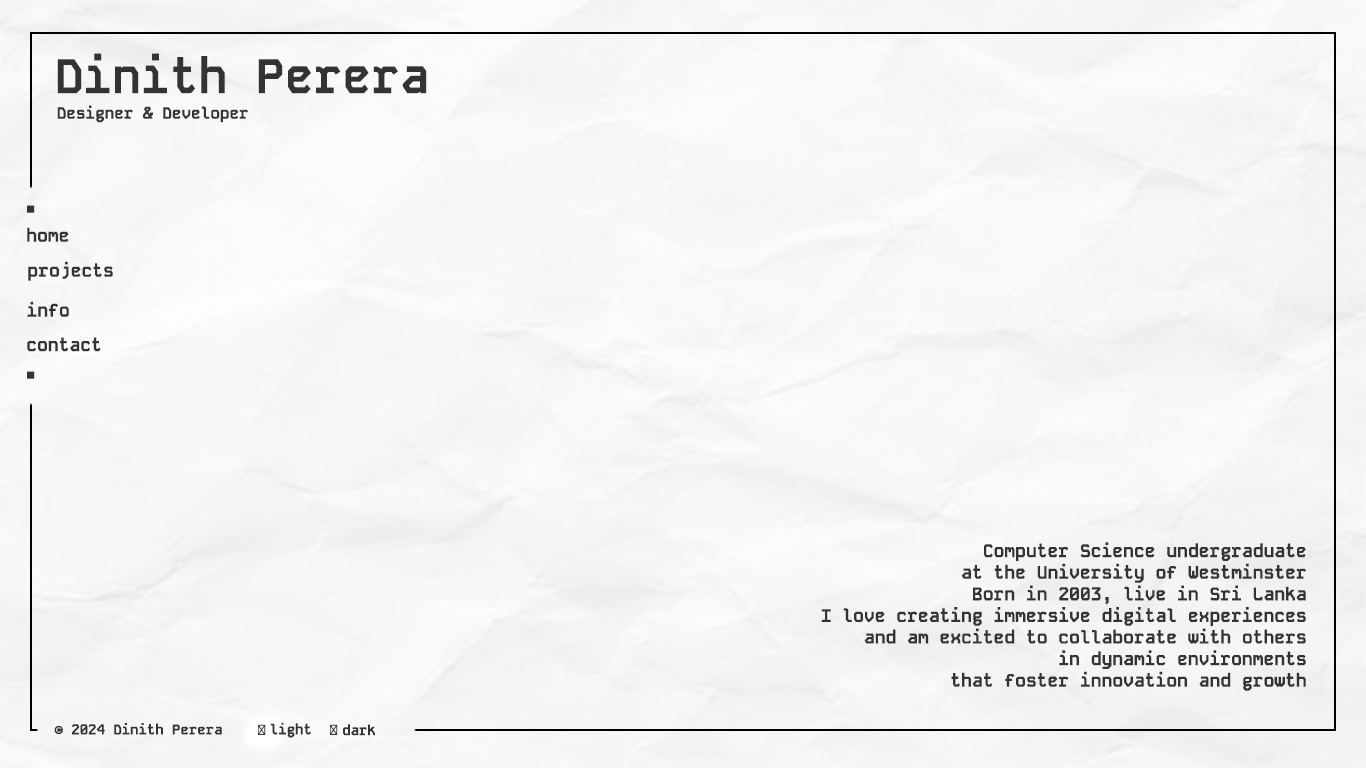
<style>
.page{position:relative;width:1366px;height:768px}
.page>*{position:absolute;margin:0}
.t1{font:48px "KodeMono-Bold";color:#333333}
.t2{font:16px "KodeMono-Bold";color:#333333}
.t3{font:36px "KodeMono-Bold";color:#333333}
.t4{font:18px "KodeMono-Bold";color:#333333}
.t5{font:14px "KodeMono-Bold";color:#333333}
.t6{font:14px "MyriadPro-Regular";color:#333333}
</style>
<div class="page">
<p class="t1" style="left:57px;top:53px;width:370px;height:41px">Dinith Perera</p>
<p class="t2" style="left:57px;top:105px;width:191px;height:18px">Designer &amp; Developer</p>
<p class="t3" style="left:27px;top:205px;width:8px;height:8px">.</p>
<p class="t4" style="left:27px;top:227px;width:42px;height:15px">home</p>
<p class="t4" style="left:28px;top:261px;width:85px;height:20px">projects</p>
<p class="t4" style="left:27px;top:301px;width:42px;height:16px">info</p>
<p class="t4" style="left:27px;top:337px;width:74px;height:15px">contact</p>
<p class="t3" style="left:27px;top:371px;width:8px;height:8px">.</p>
<p class="t4" style="left:821px;top:542px;width:485px;height:149px;text-align:right">Computer Science undergraduate<br>at the University of Westminster<br>Born in 2003, live in Sri Lanka<br> I love creating immersive digital experiences<br>and am excited to collaborate with others<br>in dynamic environments<br>that foster innovation and growth</p>
<p class="t5" style="left:54px;top:723px;width:168px;height:12px">© 2024 Dinith Perera</p>
<p class="t6" style="left:258px;top:724px;width:8px;height:11px">◻︎</p>
<p class="t5" style="left:270px;top:722px;width:41px;height:16px">light</p>
<p class="t6" style="left:330px;top:724px;width:8px;height:11px">◻︎</p>
<p class="t5" style="left:343px;top:724px;width:32px;height:12px">dark</p>
</div>
